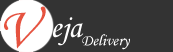
<style>
.page{position:relative;width:173px;height:52px;background:#333333}
.page>*{position:absolute;margin:0}
.t1{font:60px "MonotypeCorsiva";color:#e6533f}
.t2{font:32px "MonotypeCorsiva";color:#ffffff}
.t3{font:16px "MonotypeCorsiva";color:#ffffff}
</style>
<div class="page">
<p class="t1" style="left:4px;top:6px;width:42px;height:43px">V</p>
<p class="t2" style="left:53px;top:17px;width:31px;height:29px">eja</p>
<p class="t3" style="left:82px;top:34px;width:48px;height:16px">Delivery</p>
</div>
